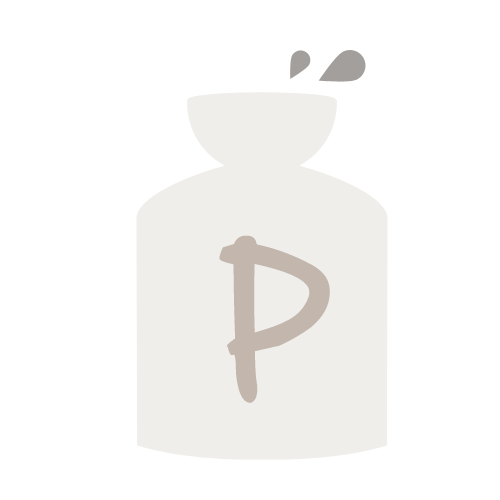
<style>
.page{position:relative;width:500px;height:500px;background:#ffffff}
.page>*{position:absolute;margin:0}
.t1{font:150px "HandOfSean";color:#c3b6ad}
</style>
<div class="page">
<p class="t1" style="left:219px;top:235px;width:111px;height:168px">P</p>
</div>
